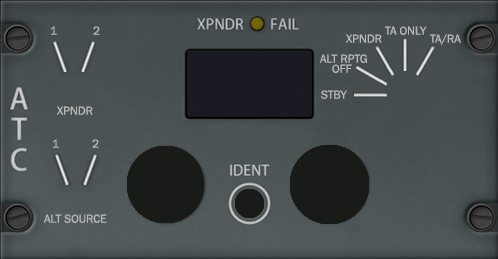
<style>
.page{position:relative;width:498px;height:259px}
.page>*{position:absolute;margin:0}
.t1{font:12px "FranklinGothic-Book";color:#b9b9b9}
.t2{font:12px/10px "FranklinGothic-Book";color:#b9b9b9}
</style>
<div class="page">
<p class="t1" style="left:51px;top:26px;width:6px;height:9px">1</p>
<p class="t1" style="left:93px;top:26px;width:7px;height:9px">2</p>
<p class="t1" style="left:385px;top:26px;width:42px;height:9px">TA ONLY</p>
<p class="t1" style="left:346px;top:34px;width:36px;height:9px">XPNDR</p>
<p class="t1" style="left:430px;top:34px;width:31px;height:11px">TA/RA</p>
<p class="t2" style="left:320px;top:54px;width:47px;height:19px">ALT RPTG<br>    OFF</p>
<p class="t1" style="left:321px;top:90px;width:26px;height:9px">STBY</p>
<p class="t1" style="left:57px;top:106px;width:36px;height:9px">XPNDR</p>
<p class="t1" style="left:53px;top:139px;width:6px;height:9px">1</p>
<p class="t1" style="left:92px;top:139px;width:7px;height:9px">2</p>
<p class="t1" style="left:44px;top:214px;width:63px;height:9px">ALT SOURCE</p>
</div>
